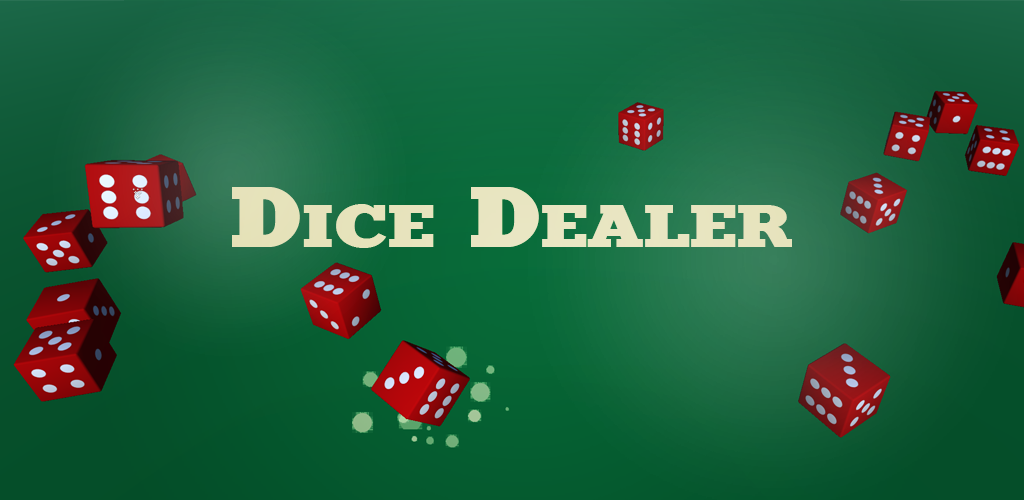
<style>
.page{position:relative;width:1024px;height:500px}
.page>*{position:absolute;margin:0}
.t1{font:85.1px "Merit";color:#e8e4bf;font-variant:small-caps;scale:1.22 1}
</style>
<div class="page">
<p class="t1" style="left:232px;top:187px;width:560px;height:61px">Dice Dealer</p>
</div>
